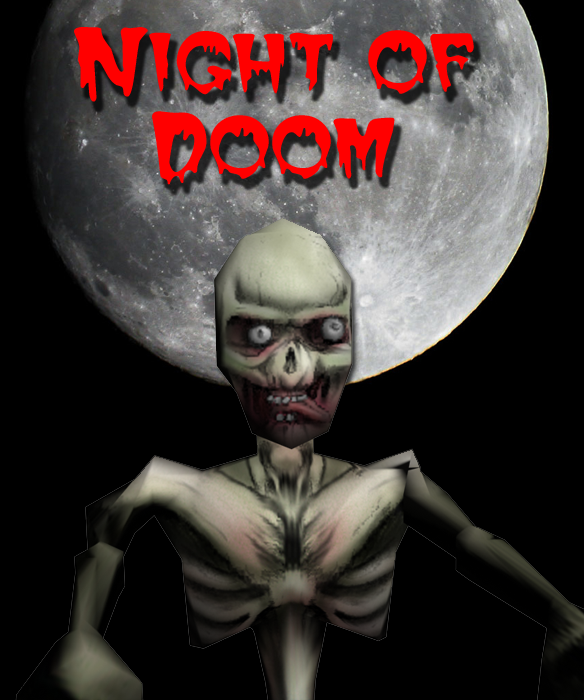
<style>
.page{position:relative;width:584px;height:700px;background:#000000}
.page>*{position:absolute;margin:0}
.t1{font:71px "CreeperRegularSWFTE";color:#ff0000}
</style>
<div class="page">
<p class="t1" style="left:74px;top:27px;width:400px;height:158px;text-align:center">Night of Doom</p>
</div>
